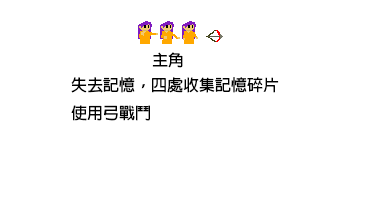
<style>
.page{position:relative;width:384px;height:216px;background:#ffffff}
.page>*{position:absolute;margin:0}
.t1{font:16px "AdobeFanHeitiStd-Bold";color:#000000}
</style>
<div class="page">
<p class="t1" style="left:152px;top:52px;width:31px;height:16px">主角</p>
<p class="t1" style="left:71px;top:77px;width:208px;height:44px">失去記憶，四處收集記憶碎片<br>使用弓戰鬥</p>
</div>
